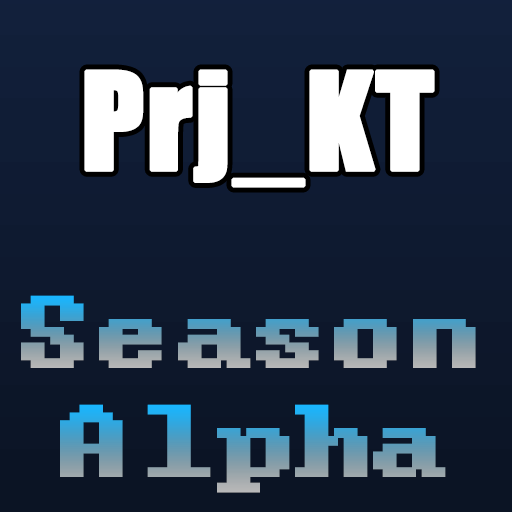
<style>
.page{position:relative;width:512px;height:512px}
.page>*{position:absolute;margin:0}
.t1{font:125px "Impact";color:#ffffff;font-weight:bold}
.t2{font:125px "Terminal";font-weight:bold}
</style>
<div class="page">
<p class="t1" style="left:84px;top:69px;width:351px;height:119px">Prj_KT</p>
<p class="t2" style="left:21px;top:295px;width:455px;height:73px">Season</p>
<p class="t2" style="left:60px;top:404px;width:386px;height:89px">Alpha</p>
</div>
